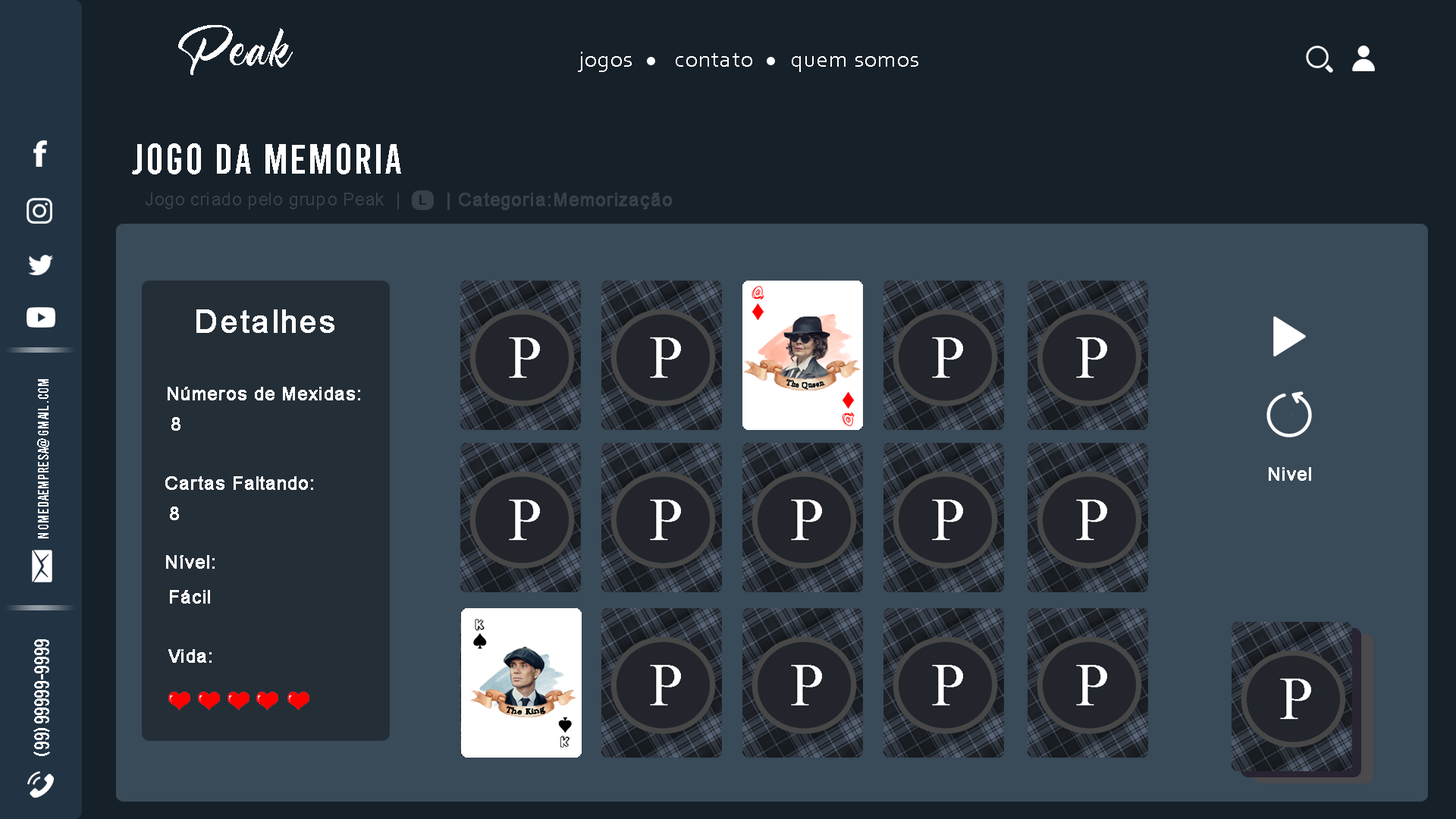
<style>
.page{position:relative;width:1456px;height:819px;background:#162029}
.page>*{position:absolute;margin:0}
.t1{font:65px "NightfallDemo";letter-spacing:0.04em;color:#ffffff}
.t2{font:22.7px "Corbel";letter-spacing:0.04em;color:#ffffff}
.t3{font:41.7px "Bebas-Regular";letter-spacing:0.04em;color:#ffffff}
.t4{font:17.3px "ArialMT";letter-spacing:0.04em;color:#364049}
.t5{font:12.8px "ArialMT";letter-spacing:0.04em;color:#162029;font-weight:bold;scale:1.04 1}
.t6{font:17.3px "ArialMT";letter-spacing:0.04em;color:#364049;font-weight:bold}
.t7{font:31.4px "ArialMT";letter-spacing:0.04em;color:#ffffff;font-weight:bold}
.t8{font:15.2px "Bebas-Regular";letter-spacing:0.04em;color:#ffffff}
.t9{font:17.3px "ArialMT";letter-spacing:0.04em;color:#ffffff;font-weight:bold}
.t10{font:21.2px "Bebas-Regular";letter-spacing:0.04em;color:#ffffff}
</style>
<div class="page">
<p class="t1" style="left:178px;top:25px;width:115px;height:50px">Peak</p>
<p class="t2" style="left:578px;top:52px;width:54px;height:20px">jogos</p>
<p class="t2" style="left:676px;top:53px;width:76px;height:14px">contato</p>
<p class="t2" style="left:792px;top:56px;width:126px;height:16px">quem somos</p>
<p class="t3" style="left:132px;top:143px;width:269px;height:31px">Jogo da Memoria</p>
<p class="t4" style="left:146px;top:193px;width:253px;height:16px">Jogo criado pelo grupo Peak  |</p>
<p class="t5" style="left:419px;top:195px;width:7px;height:10px">L</p>
<p class="t6" style="left:447px;top:193px;width:225px;height:17px">| Categoria:Memorização</p>
<p class="t7" style="left:196px;top:309px;width:138px;height:24px">Detalhes</p>
<p class="t8" style="left:37px;top:379px;width:12px;height:159px;rotate:-90deg">nomedaempresa@gmail.com</p>
<p class="t9" style="left:168px;top:387px;width:192px;height:13px">Números de Mexidas:</p>
<p class="t9" style="left:171px;top:417px;width:9px;height:14px">8</p>
<p class="t9" style="left:1269px;top:467px;width:42px;height:14px">Nivel</p>
<p class="t9" style="left:165px;top:476px;width:148px;height:14px">Cartas Faltando:</p>
<p class="t9" style="left:170px;top:507px;width:9px;height:13px">8</p>
<p class="t9" style="left:166px;top:555px;width:49px;height:14px">Nível:</p>
<p class="t9" style="left:170px;top:590px;width:40px;height:14px">Fácil</p>
<p class="t10" style="left:33px;top:639px;width:17px;height:117px;rotate:-90deg">(99)99999-9999</p>
<p class="t9" style="left:168px;top:649px;width:44px;height:14px">Vida:</p>
</div>
